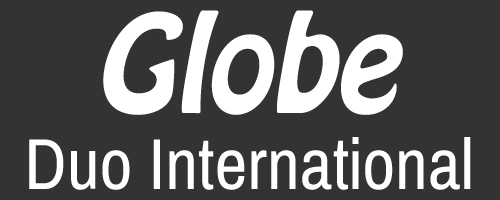
<style>
.page{position:relative;width:500px;height:200px;background:#333333}
.page>*{position:absolute;margin:0}
.t1{font:120px "HoboStd";color:#ffffff;font-style:italic}
.t2{font:72px "ArchivoNarrow-Regular";color:#ffffff}
</style>
<div class="page">
<p class="t1" style="left:103px;top:10px;width:300px;height:105px">Globe</p>
<p class="t2" style="left:29px;top:137px;width:442px;height:53px">Duo International</p>
</div>
